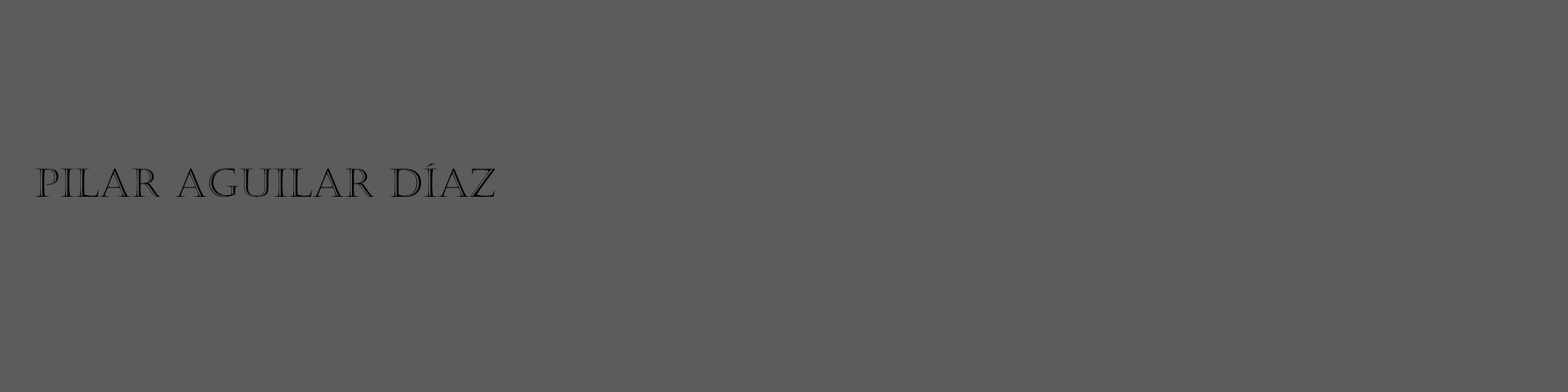
<style>
.page{position:relative;width:1568px;height:392px;background:#5c5c5c}
.page>*{position:absolute;margin:0}
.t1{font:39.2px "Castellar";color:#000000}
</style>
<div class="page">
<p class="t1" style="left:34px;top:163px;width:461px;height:35px">pilar aguilar díaz</p>
</div>
